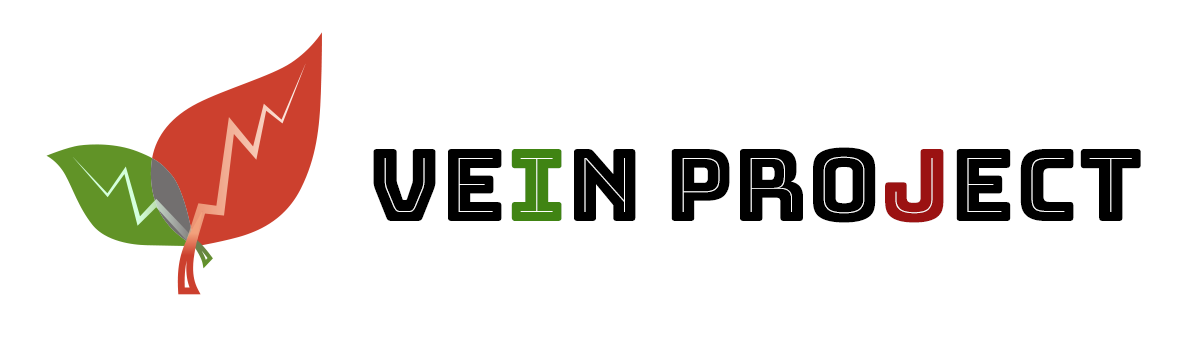
<style>
.page{position:relative;width:1200px;height:350px;background:#ffffff}
.page>*{position:absolute;margin:0}
.t1{font:100px "BungeeInline-Regular";color:#000000}
.t2{font:100px "BungeeInline-Regular";color:#408413}
.t3{font:100px "BungeeInline-Regular";color:#9b1212}
</style>
<div class="page">
<p class="t1" style="left:373px;top:147px;width:768px;height:76px">Ve<span class="t2">i</span>n Pro<span class="t3">j</span>ect</p>
</div>
